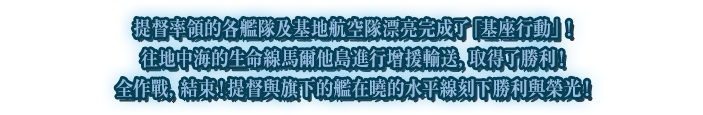
<style>
.page{position:relative;width:703px;height:115px;background:#ffffff}
.page>*{position:absolute;margin:0}
.t1{font:20px/30px "RyuminPr6N-ExBold";color:#93bee0;scale:0.9 1}
</style>
<div class="page">
<p class="t1" style="left:116px;top:18px;width:473px;height:81px;text-align:center">提督率領的各艦隊及基地航空隊漂亮完成了「基座行動」！<br>往地中海的生命線馬爾他島進行增援輸送，取得了勝利！<br>全作戰，結束！提督與旗下的艦在曉的水平線刻下勝利與榮光！</p>
</div>
